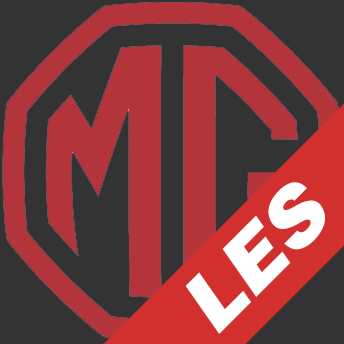
<style>
.page{position:relative;width:344px;height:344px;background:#333333}
.page>*{position:absolute;margin:0}
.t1{font:80px "FZCCHJW--GB1-0";color:#ffffff;font-style:italic}
</style>
<div class="page">
<p class="t1" style="left:185px;top:182px;width:140px;height:152px;rotate:-45deg">LES</p>
</div>
